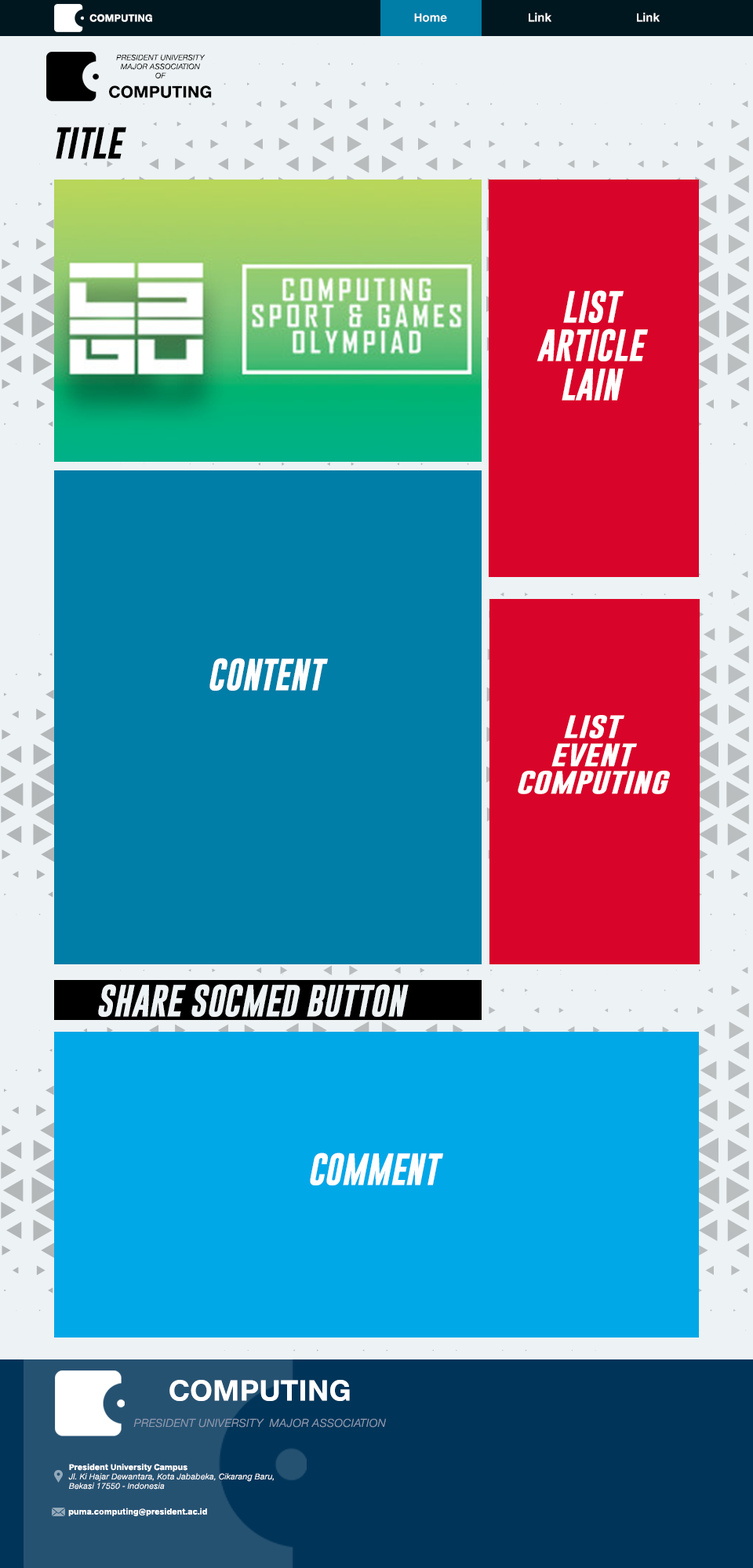
<style>
.page{position:relative;width:753px;height:1568px}
.page>*{position:absolute;margin:0}
.t1{font:9.8px "HelveticaNeueeTextPro-Bold";color:#ffffff}
.t2{font:4.6px "HelveticaNeueeTextPro-LightItal";color:#ffffff}
.t3{font:11px "HelveticaNeueeTextPro-Medium";color:#ffffff}
.t4{font:7.5px "HelveticaNeueeTextPro-LightItal";color:#000000}
.t5{font:16.1px "HelveticaNeueeTextPro-Bold";color:#000000}
.t6{font:32.1px "GoboldBoldItalic-Italic";color:#000000}
.t7{font:32.1px "GoboldBoldItalic-Italic";color:#fffefe}
.t8{font:23.1px "GoboldBoldItalic-Italic";color:#fffefe;scale:1.39 1}
.t9{font:32.1px "GoboldBoldItalic-Italic";color:#edf2f4}
.t10{font:11px "HelveticaNeueeTextPro-LightItal";color:#8d99ae}
.t11{font:28.2px "HelveticaNeueeTextPro-Bold";color:#ffffff}
.t12{font:7.8px "HelveticaNeueeTextPro-LightItal";color:#ffffff}
.t13{font:7.8px "HelveticaNeueeTextPro-Bold";color:#ffffff}
</style>
<div class="page">
<p class="t1" style="left:89px;top:14px;width:63px;height:8px"><span class="t2"><br></span>COMPUTING</p>
<p class="t3" style="left:414px;top:13px;width:33px;height:9px">Home</p>
<p class="t3" style="left:528px;top:13px;width:23px;height:9px">Link</p>
<p class="t3" style="left:637px;top:13px;width:22px;height:9px">Link</p>
<p class="t4" style="left:109px;top:54px;width:103px;height:44px;text-align:justify">PRESIDENT UNIVERSITY<br>MAJOR ASSOCIATION<br>OF<br><span class="t5">COMPUTING</span></p>
<p class="t6" style="left:56px;top:127px;width:70px;height:32px">TITLE</p>
<p class="t7" style="left:536px;top:290px;width:112px;height:111px;text-align:center">LIST<br>ARTICLE<br>LAIN</p>
<p class="t7" style="left:209px;top:658px;width:119px;height:33px">CONTENT</p>
<p class="t8" style="left:517px;top:715px;width:153px;height:79px;text-align:center">LIST<br>EVENT<br>COMPUTING</p>
<p class="t9" style="left:98px;top:984px;width:310px;height:33px">SHARE SOCMED BUTTON</p>
<p class="t7" style="left:310px;top:1152px;width:133px;height:33px">COMMENT</p>
<p class="t10" style="left:133px;top:1380px;width:253px;height:48px;text-align:justify"><span class="t11">COMPUTING<br></span><br>PRESIDENT UNIVERSITY  MAJOR ASSOCIATION</p>
<p class="t12" style="left:68px;top:1464px;width:206px;height:26px;text-align:right"><span class="t13">President University Campus</span> <br>Jl. Ki Hajar Dewantara, Kota Jababeka, Cikarang Baru, <br>Bekasi 17550 - Indonesia</p>
<p class="t13" style="left:68px;top:1508px;width:139px;height:8px">puma.computing@president.ac.id</p>
</div>
